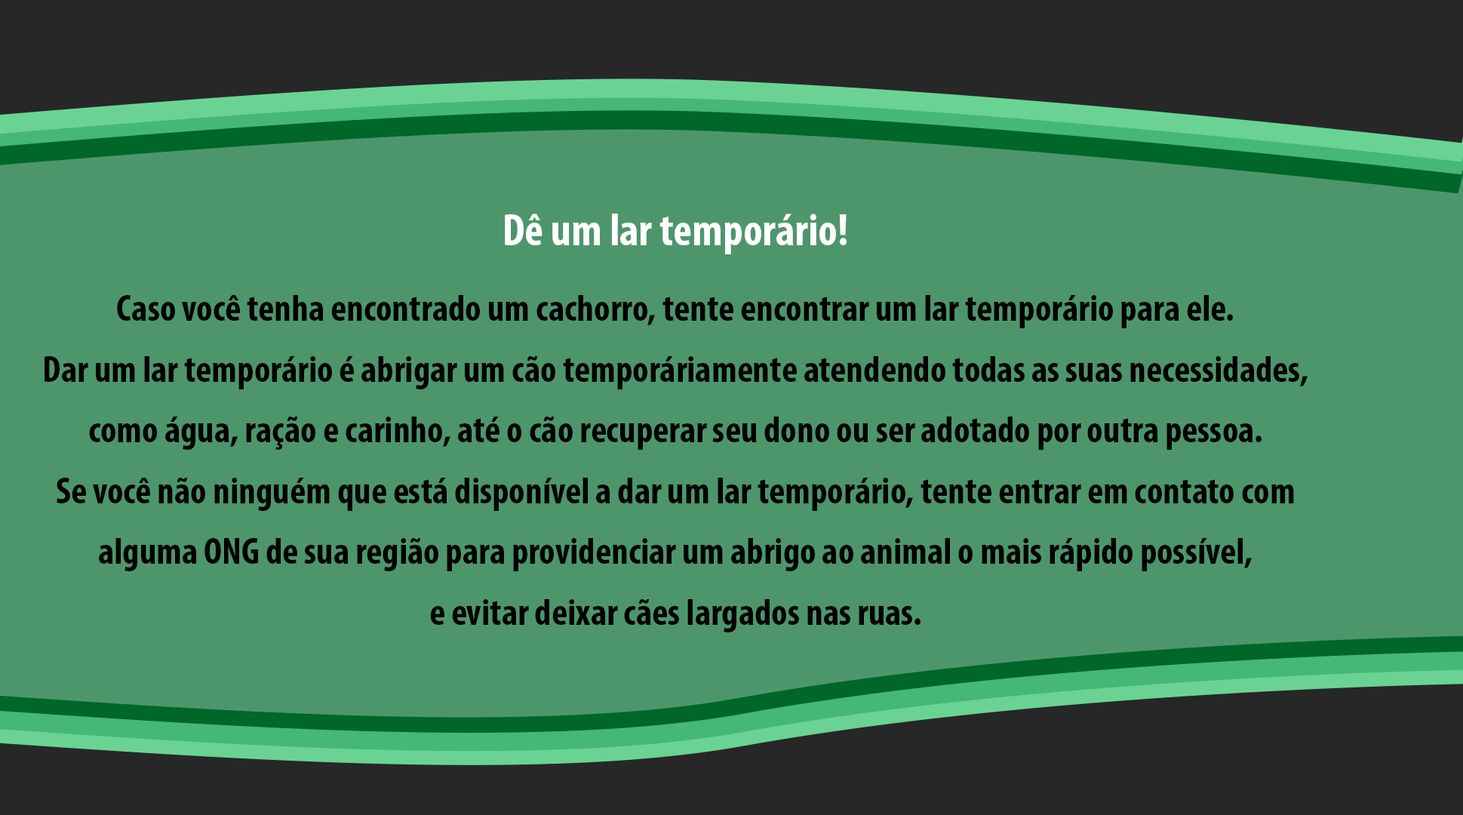
<style>
.page{position:relative;width:1463px;height:815px;background:#4d966b}
.page>*{position:absolute;margin:0}
.t1{font:37.7px/30.4px "MyriadPro-BoldCond";color:#000000}
.t2{font:45.3px/30.4px "MyriadPro-BoldCond";color:#ffffff}
</style>
<div class="page">
<p class="t1" style="left:45px;top:214px;width:1263px;height:418px;text-align:center"><span class="t2">Dê um lar temporário!<br> <br></span>Caso você tenha encontrado um cachorro, tente encontrar um lar temporário para ele.<br><br>Dar um lar temporário é abrigar um cão temporáriamente atendendo todas as suas necessidades,<br><br>como água, ração e carinho, até o cão recuperar seu dono ou ser adotado por outra pessoa.<br><br>Se você não ninguém que está disponível a dar um lar temporário, tente entrar em contato com<br><br>alguma ONG de sua região para providenciar um abrigo ao animal o mais rápido possível,<br><br>e evitar deixar cães largados nas ruas.</p>
</div>
